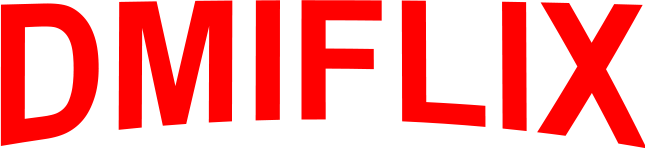
<style>
.page{position:relative;width:645px;height:149px;background:#ffffff}
.page>*{position:absolute;margin:0}
.t1{font:200px "ArialNarrow-Bold";color:#ff0000}
</style>
<div class="page">
<p class="t1" style="left:0px;top:0px;width:645px;height:149px">DMIFLIX</p>
</div>
